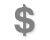
<style>
.page{position:relative;width:50px;height:40px;background:#ffffff}
.page>*{position:absolute;margin:0}
.t1{font:37px "Harabara";color:#818181}
</style>
<div class="page">
<p class="t1" style="left:14px;top:4px;width:21px;height:32px">$</p>
</div>
